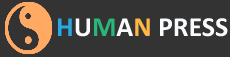
<style>
.page{position:relative;width:230px;height:57px;background:#333333}
.page>*{position:absolute;margin:0}
.t1{font:27.8px "Calibri-Bold";color:#f9fbfd}
.t2{font:27.8px "Calibri-Bold";color:#27a9e3}
.t3{font:27.8px "Calibri-Bold";color:#fdfdfe}
.t4{font:27.8px "Calibri-Bold";color:#28b779}
.t5{font:27.8px "Calibri-Bold";color:#fbfbfc}
.t6{font:27.8px "Calibri-Bold";color:#ffb848}
</style>
<div class="page">
<p class="t1" style="left:58px;top:18px;width:170px;height:19px"><span class="t2">H</span><span class="t3">U</span><span class="t4">M</span><span class="t5">A</span><span class="t6">N </span>PRESS</p>
</div>
